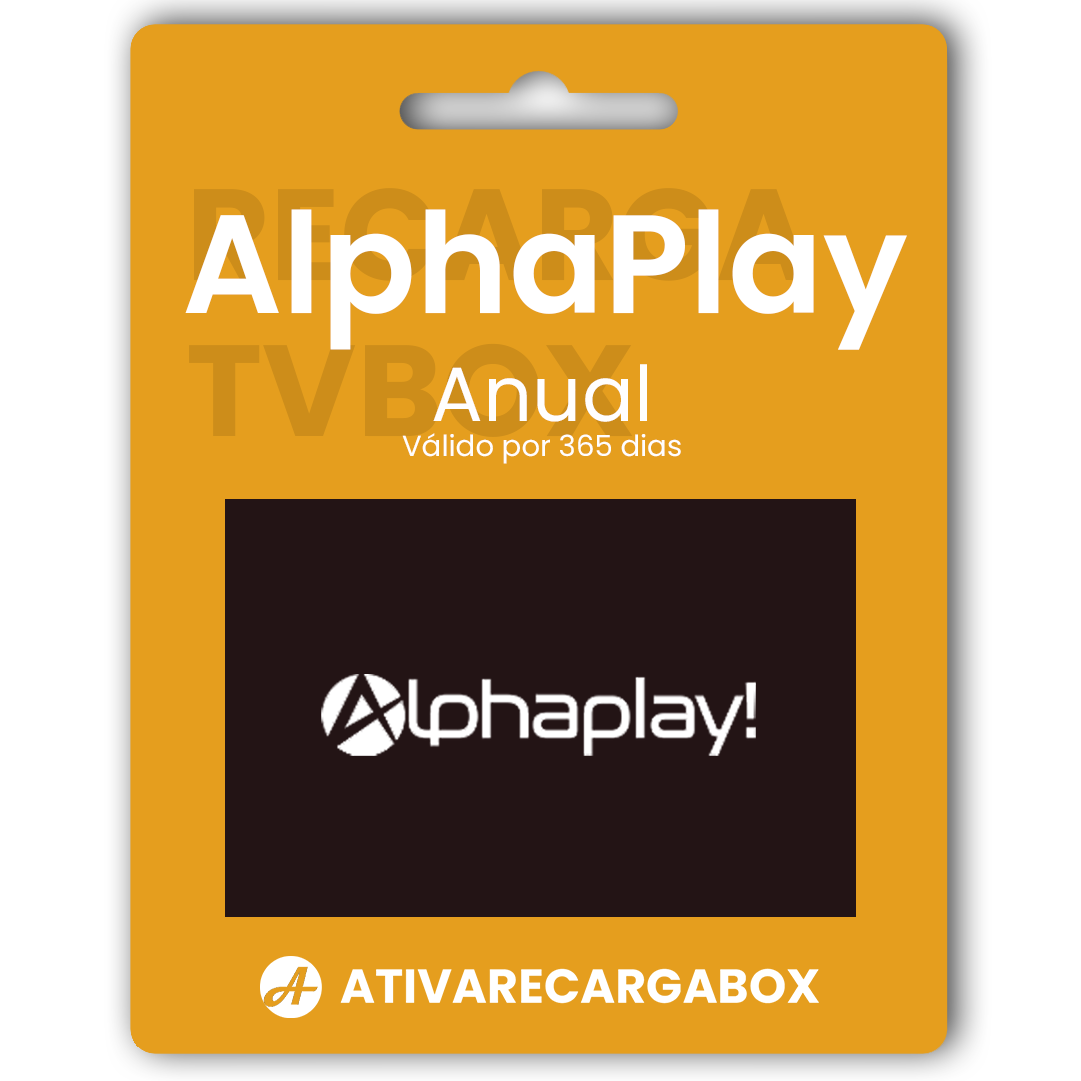
<style>
.page{position:relative;width:1081px;height:1081px;background:#e59e1e}
.page>*{position:absolute;margin:0}
.t1{font:129.4px "Poppins-Bold";color:#cd8d1a}
.t2{font:139.9px "Poppins-SemiBold";color:#ffffff}
.t3{font:29.1px "Poppins-Regular";color:#fffefe}
.t4{font:76.7px "Poppins-Regular";color:#fffefe}
</style>
<div class="page">
<p class="t1" style="left:189px;top:188px;width:621px;height:249px">RECARGA<br>TVBOX</p>
<p class="t2" style="left:185px;top:209px;width:722px;height:141px">AlphaPlay</p>
<p class="t3" style="left:402px;top:364px;width:279px;height:100px;text-align:center"><span class="t4">Anual<br></span>Válido por 365 dias</p>
</div>
